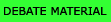
<style>
.page{position:relative;width:111px;height:22px;background:#33ff33}
.page>*{position:absolute;margin:0}
.t1{font:11px "Verdana";color:#000000}
</style>
<div class="page">
<p class="t1" style="left:4px;top:7px;width:103px;height:8px">DEBATE MATERIAL</p>
</div>
